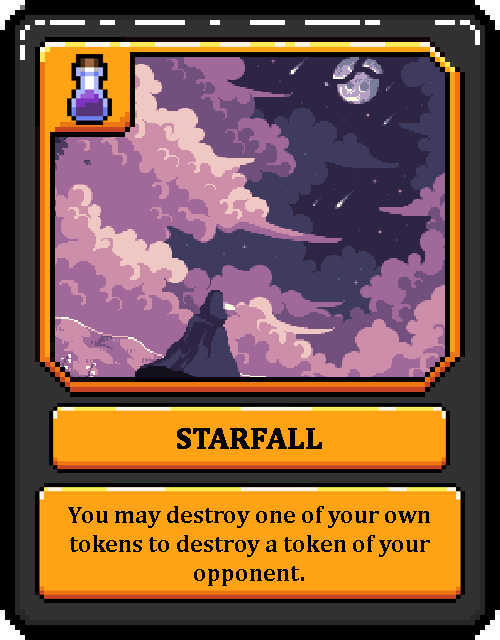
<style>
.page{position:relative;width:500px;height:640px}
.page>*{position:absolute;margin:0}
.t1{font:30px "Cambria-Bold";color:#000000;text-transform:uppercase;font-weight:bold}
.t2{font:24px "Cambria-Bold";color:#000000}
</style>
<div class="page">
<p class="t1" style="left:177px;top:428px;width:145px;height:21px">Starfall</p>
<p class="t2" style="left:68px;top:506px;width:362px;height:80px;text-align:center">You may destroy one of your own tokens to destroy a token of your  opponent.</p>
</div>
